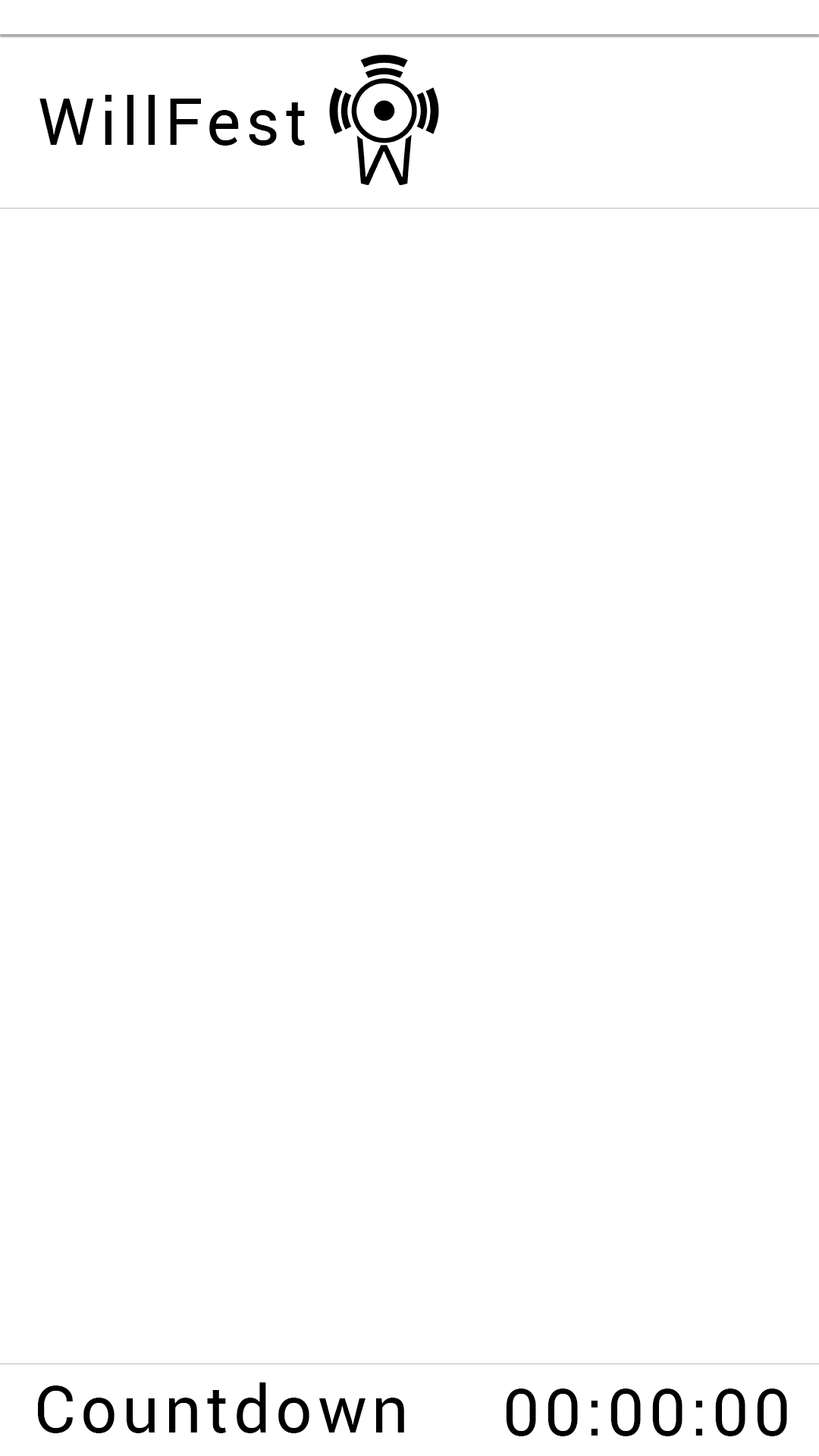
<style>
.page{position:relative;width:819px;height:1456px;background:#ffffff}
.page>*{position:absolute;margin:0}
.t1{font:65.2px "Roboto-Regular";letter-spacing:0.075em;color:#000000}
</style>
<div class="page">
<p class="t1" style="left:39px;top:95px;width:266px;height:51px">WillFest</p>
<p class="t1" style="left:38px;top:1382px;width:366px;height:51px">Countdown</p>
<p class="t1" style="left:506px;top:1388px;width:281px;height:48px">00:00:00</p>
</div>
